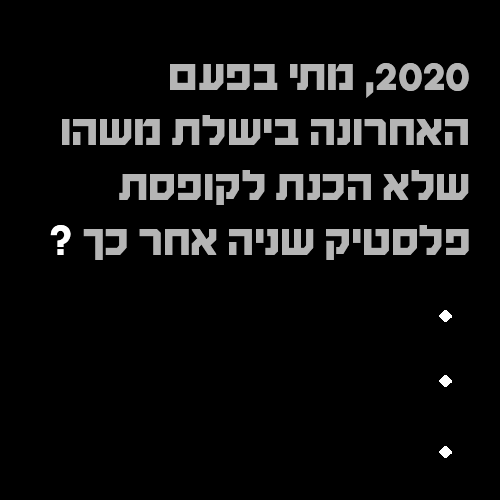
<style>
.page{position:relative;width:500px;height:500px;background:#000000}
.page>*{position:absolute;margin:0}
.t1{font:45.8px "HaimG-Regular";color:#b5b5b5}
.t2{font:45.8px "HaimG-Regular";color:#ffffff}
</style>
<div class="page">
<p class="t1" style="left:50px;top:63px;width:419px;height:197px">2020, מתי בפעם האחרונה בישלת משהו שלא הכנת לקופסת פלסטיק שניה אחר כך <span class="t2">?</span></p>
</div>
